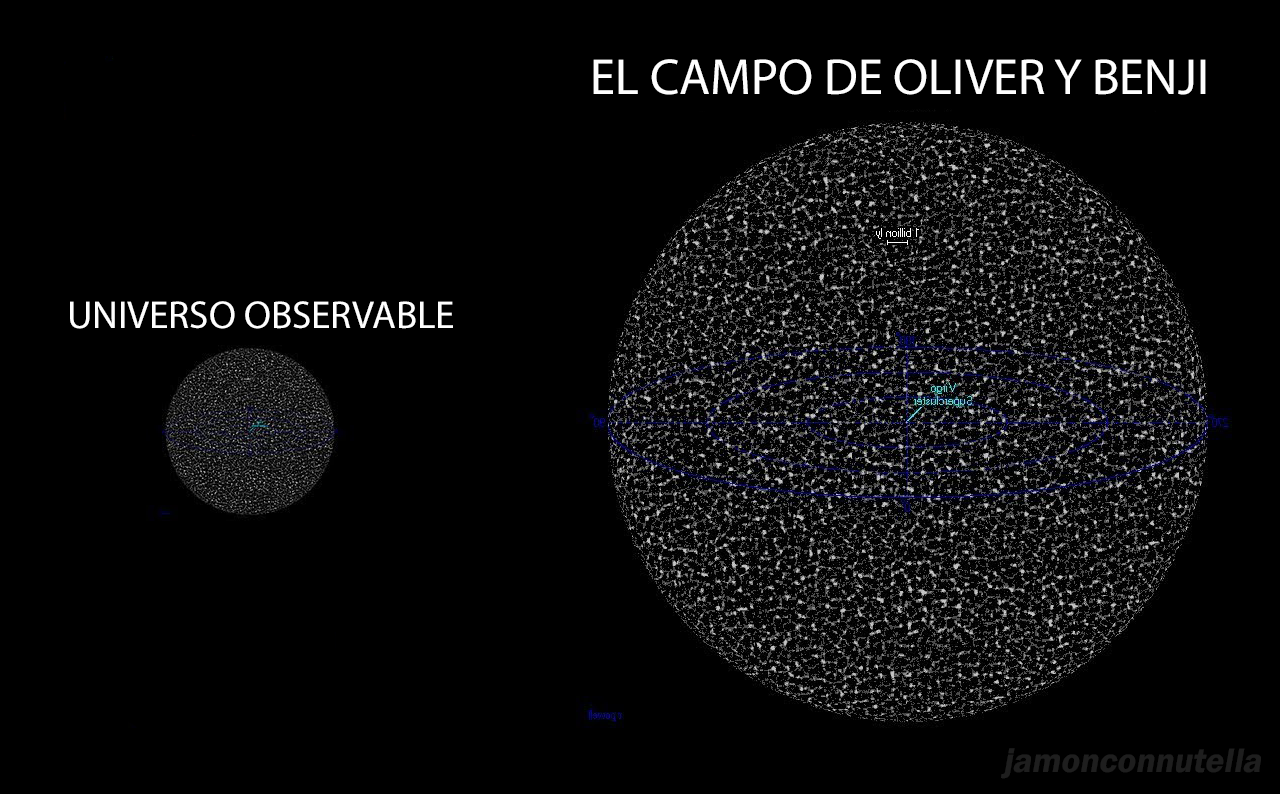
<style>
.page{position:relative;width:1280px;height:794px;background:#000000}
.page>*{position:absolute;margin:0}
.t1{font:50.8px "MyriadPro-Regular";color:#fefefe}
.t2{font:39.1px "MyriadPro-Regular";color:#fefefe}
.t3{font:35px "FranklinGothic-Demi";color:#1e1e1e;font-style:italic}
</style>
<div class="page">
<p class="t1" style="left:593px;top:59px;width:613px;height:36px">EL CAMPO DE OLIVER Y BENJI</p>
<p class="t2" style="left:70px;top:301px;width:383px;height:28px">UNIVERSO OBSERVABLE</p>
<p class="t3" style="left:1001px;top:748px;width:260px;height:31px">jamonconnutella</p>
</div>
